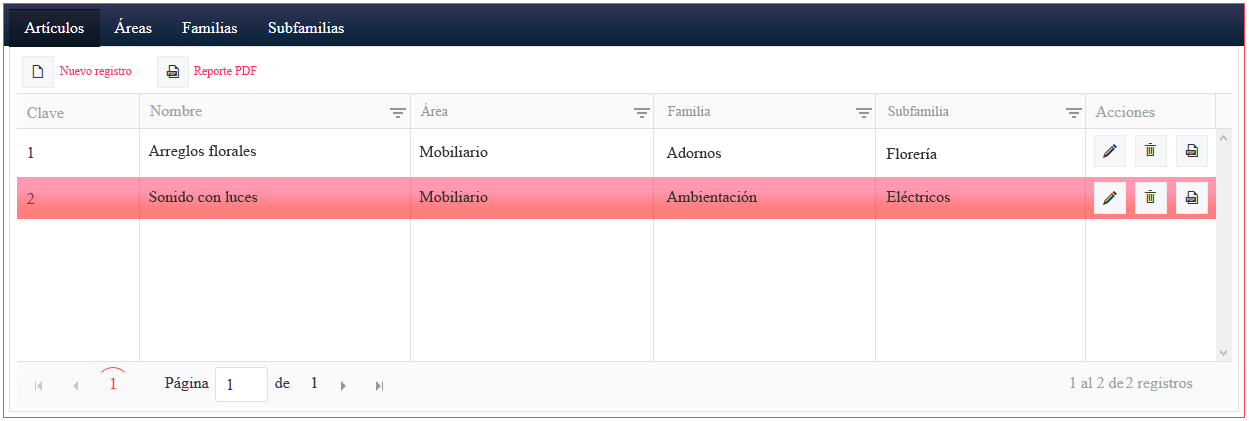
<style>
.page{position:relative;width:1249px;height:421px;background:#ffffff}
.page>*{position:absolute;margin:0}
.t1{font:12px "TimesNewRomanPSMT";color:#ff3366}
.t2{font:14px "TimesNewRomanPSMT";color:#999999}
.t3{font:16px "TimesNewRomanPSMT";color:#333333}
</style>
<div class="page">
<p class="t1" style="left:59px;top:66px;width:73px;height:12px">Nuevo registro</p>
<p class="t1" style="left:194px;top:66px;width:63px;height:12px">Reporte PDF</p>
<p class="t2" style="left:420px;top:103px;width:28px;height:13px">Área</p>
<p class="t2" style="left:667px;top:106px;width:44px;height:10px">Familia</p>
<p class="t2" style="left:888px;top:106px;width:61px;height:10px">Subfamilia</p>
<p class="t3" style="left:148px;top:145px;width:108px;height:14px">Arreglos florales</p>
<p class="t3" style="left:419px;top:146px;width:69px;height:11px">Mobiliario</p>
<p class="t3" style="left:666px;top:147px;width:55px;height:11px">Adornos</p>
<p class="t3" style="left:886px;top:148px;width:52px;height:11px">Florería</p>
<p class="t3" style="left:149px;top:191px;width:109px;height:11px">Sonido con luces</p>
<p class="t3" style="left:419px;top:191px;width:69px;height:11px">Mobiliario</p>
<p class="t3" style="left:666px;top:191px;width:91px;height:11px">Ambientación</p>
<p class="t3" style="left:886px;top:191px;width:64px;height:11px">Eléctricos</p>
<p class="t3" style="left:312px;top:377px;width:5px;height:11px">1</p>
</div>
